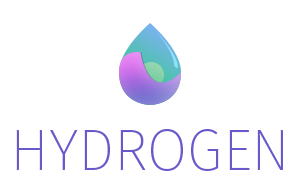
<style>
.page{position:relative;width:300px;height:190px;background:#ffffff}
.page>*{position:absolute;margin:0}
.t1{font:58px "FiraSans-UltraLight";color:#685aca}
</style>
<div class="page">
<p class="t1" style="left:16px;top:129px;width:267px;height:42px">HYDROGEN</p>
</div>
